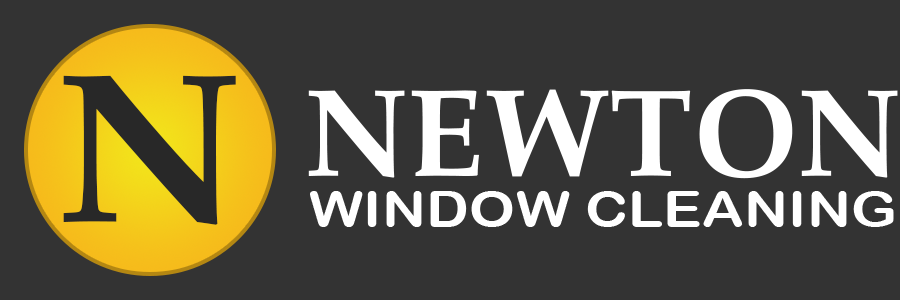
<style>
.page{position:relative;width:900px;height:300px;background:#333333}
.page>*{position:absolute;margin:0}
.t1{font:214.4px "Palatino-Bold";color:#282828;scale:1.05 1}
.t2{font:125px "Palatino-Bold";color:#ffffff}
.t3{font:50px "ArialRoundedMTBold";color:#ffffff;scale:1.17 1}
</style>
<div class="page">
<p class="t1" style="left:63px;top:75px;width:173px;height:150px">N</p>
<p class="t2" style="left:308px;top:89px;width:590px;height:90px">NEWTON</p>
<p class="t3" style="left:310px;top:191px;width:584px;height:36px">WINDOW CLEANING</p>
</div>
